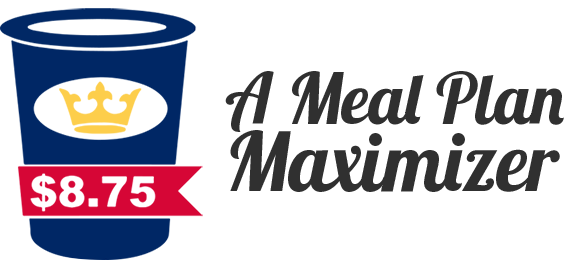
<style>
.page{position:relative;width:564px;height:264px;background:#ffffff}
.page>*{position:absolute;margin:0}
.t1{font:70.3px/31px "Lobster1.4";color:#303030}
.t2{font:81.6px/67.5px "Lobster1.4";color:#303030}
</style>
<div class="page">
<p class="t1" style="left:225px;top:71px;width:339px;height:121px">A Meal Plan <br><span class="t2">Maximizer</span></p>
</div>
